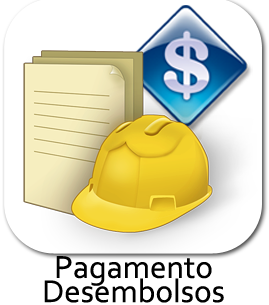
<style>
.page{position:relative;width:269px;height:305px;background:#ffffff}
.page>*{position:absolute;margin:0}
.t1{font:33px/24.3px "Corbel";color:#000000}
</style>
<div class="page">
<p class="t1" style="left:44px;top:256px;width:180px;height:47px;text-align:center">Pagamento<br>Desembolsos</p>
</div>
